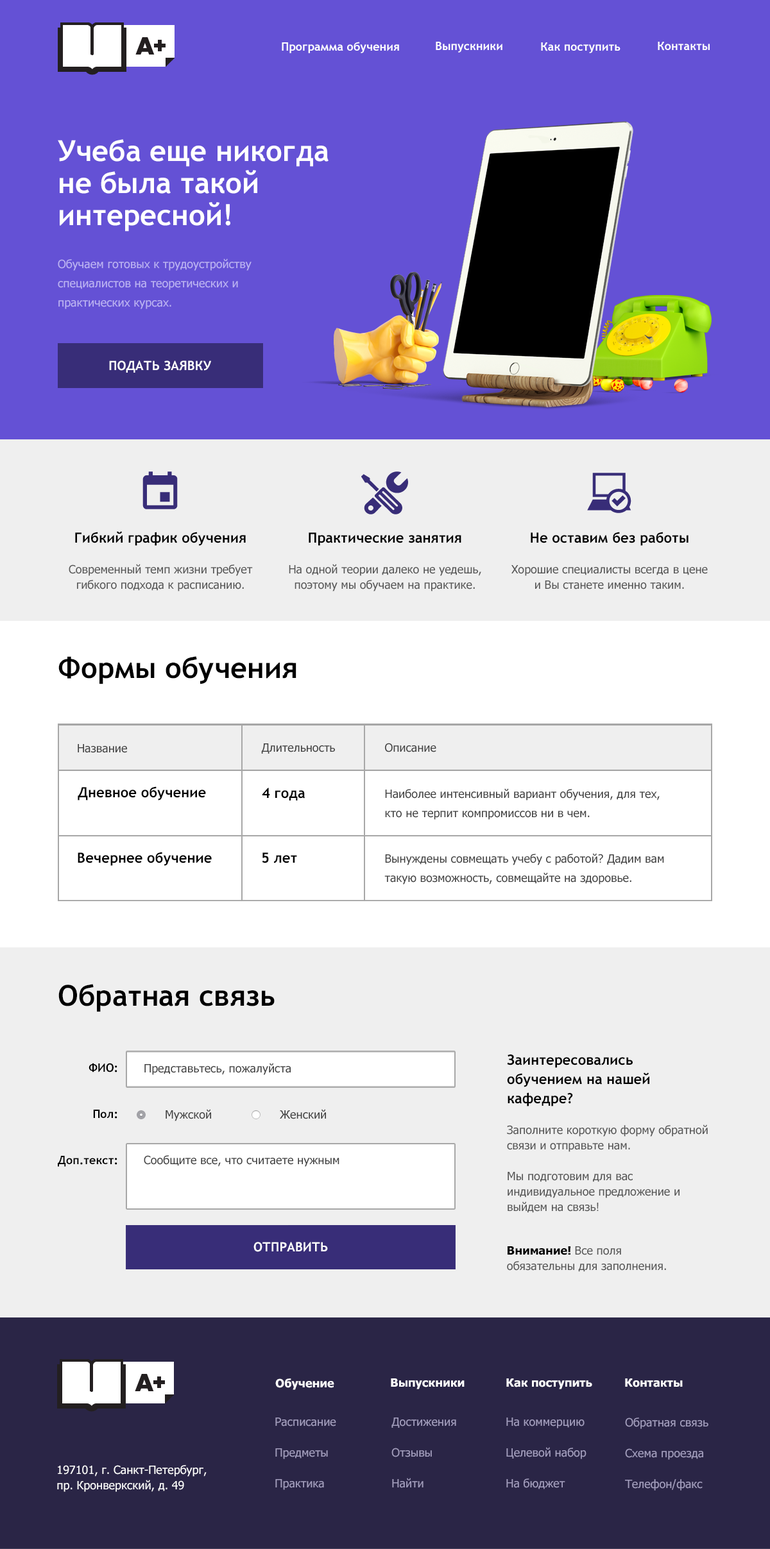
<style>
.page{position:relative;width:770px;height:1549px;background:#efefef}
.page>*{position:absolute;margin:0}
.t1{font:11.5px "TrebuchetMS-Bold";color:#ffffff}
.t2{font:28.9px/32.1px "TrebuchetMS-Bold";color:#ffffff}
.t3{font:11.5px/19.2px "Tahoma";color:#bcb3f2}
.t4{font:12.8px "TrebuchetMS-Bold";color:#ffffff;text-transform:uppercase}
.t5{font:11.5px/15.4px "Tahoma";color:#555555}
.t6{font:14.1px/15.4px "TrebuchetMS-Bold";color:#000000}
.t7{font:28.9px "TrebuchetMS-Bold";color:#000000}
.t8{font:11.5px "Tahoma";color:#404040}
.t9{font:14.1px "TrebuchetMS-Bold";color:#000000}
.t10{font:11.5px/19.2px "Tahoma";color:#404040}
.t11{font:14.1px/19.2px "TrebuchetMS-Bold";color:#000000}
.t12{font:11.5px/15.4px "TrebuchetMS-Bold";color:#000000}
.t13{font:11.5px/15.4px "Tahoma-Bold";color:#000000}
.t14{font:11.5px "Tahoma-Bold";color:#ffffff}
.t15{font:11.5px/15.4px "Tahoma";color:#a39ebe}
.t16{font:11.5px/15.4px "Tahoma";color:#ffffff}
</style>
<div class="page">
<p class="t1" style="left:282px;top:42px;width:117px;height:11px">Программа обучения</p>
<p class="t1" style="left:436px;top:42px;width:66px;height:11px">Выпускники</p>
<p class="t1" style="left:657px;top:42px;width:52px;height:9px">Контакты</p>
<p class="t1" style="left:541px;top:42px;width:79px;height:11px">Как поступить</p>
<p class="t2" style="left:58px;top:139px;width:270px;height:93px">Учеба еще никогда<br>не была такой интересной!</p>
<p class="t3" style="left:58px;top:259px;width:193px;height:50px">Обучаем готовых к трудоустройству специалистов на теоретических и практических курсах.</p>
<p class="t4" style="left:109px;top:360px;width:102px;height:13px">Подать заявку</p>
<p class="t5" style="left:69px;top:531px;width:184px;height:60px;text-align:center"><span class="t6">Гибкий график обучения<br><br></span>Современный темп жизни требует гибкого подхода к расписанию.</p>
<p class="t5" style="left:289px;top:532px;width:192px;height:59px;text-align:center"><span class="t6">Практические занятия<br><br></span>На одной теории далеко не уедешь, поэтому мы обучаем на практике.</p>
<p class="t5" style="left:511px;top:532px;width:197px;height:57px;text-align:center"><span class="t6">Не оставим без работы<br><br></span>Хорошие специалисты всегда в цене и Вы станете именно таким.</p>
<p class="t7" style="left:58px;top:656px;width:238px;height:28px">Формы обучения</p>
<p class="t8" style="left:78px;top:744px;width:49px;height:9px">Название</p>
<p class="t8" style="left:261px;top:743px;width:74px;height:11px">Длительность</p>
<p class="t8" style="left:385px;top:743px;width:51px;height:9px">Описание</p>
<p class="t9" style="left:78px;top:786px;width:128px;height:15px">Дневное обучение</p>
<p class="t9" style="left:262px;top:788px;width:43px;height:13px">4 года</p>
<p class="t10" style="left:385px;top:788px;width:274px;height:32px">Наиболее интенсивный вариант обучения, для тех, <br>кто не терпит компромиссов ни в чем.</p>
<p class="t9" style="left:78px;top:852px;width:134px;height:14px">Вечернее обучение</p>
<p class="t9" style="left:262px;top:852px;width:35px;height:11px">5 лет</p>
<p class="t10" style="left:384px;top:853px;width:280px;height:32px">Вынуждены совмещать учебу с работой? Дадим вам такую возможность, совмещайте на здоровье.</p>
<p class="t7" style="left:58px;top:984px;width:217px;height:28px">Обратная связь</p>
<p class="t5" style="left:507px;top:1055px;width:201px;height:158px"><span class="t11">Заинтересовались обучением на нашей кафедре?<br><br></span>Заполните короткую форму обратной связи и отправьте нам.<br><br>Мы подготовим для вас индивидуальное предложение и выйдем на связь!</p>
<p class="t12" style="left:58px;top:1063px;width:59px;height:104px;text-align:right">ФИО:<br><br><br>Пол:<br><br><br>Доп.текст:</p>
<p class="t8" style="left:144px;top:1063px;width:147px;height:12px">Представьтесь, пожалуйста</p>
<p class="t8" style="left:165px;top:1109px;width:46px;height:12px">Мужской</p>
<p class="t8" style="left:280px;top:1109px;width:46px;height:10px">Женский</p>
<p class="t8" style="left:144px;top:1155px;width:195px;height:12px">Сообщите все, что считаете нужным</p>
<p class="t4" style="left:253px;top:1242px;width:75px;height:10px">Отправить</p>
<p class="t5" style="left:507px;top:1246px;width:159px;height:26px"><span class="t13">Внимание! </span>Все поля <br>обязательны для заполнения.</p>
<p class="t14" style="left:275px;top:1378px;width:59px;height:12px">Обучение</p>
<p class="t14" style="left:391px;top:1378px;width:73px;height:11px">Выпускники</p>
<p class="t14" style="left:506px;top:1378px;width:86px;height:11px">Как поступить</p>
<p class="t14" style="left:625px;top:1378px;width:58px;height:9px">Контакты</p>
<p class="t15" style="left:275px;top:1418px;width:61px;height:72px">Расписание<br><br>Предметы<br><br>Практика</p>
<p class="t15" style="left:391px;top:1418px;width:65px;height:70px">Достижения<br><br>Отзывы<br><br>Найти</p>
<p class="t15" style="left:506px;top:1418px;width:80px;height:71px">На коммерцию<br><br>Целевой набор<br><br>На бюджет</p>
<p class="t15" style="left:625px;top:1418px;width:83px;height:73px">Обратная связь<br><br>Схема проезда<br><br>Телефон/факс</p>
<p class="t16" style="left:57px;top:1465px;width:150px;height:27px">197101, г. Санкт-Петербург, <br>пр. Кронверкский, д. 49</p>
</div>
